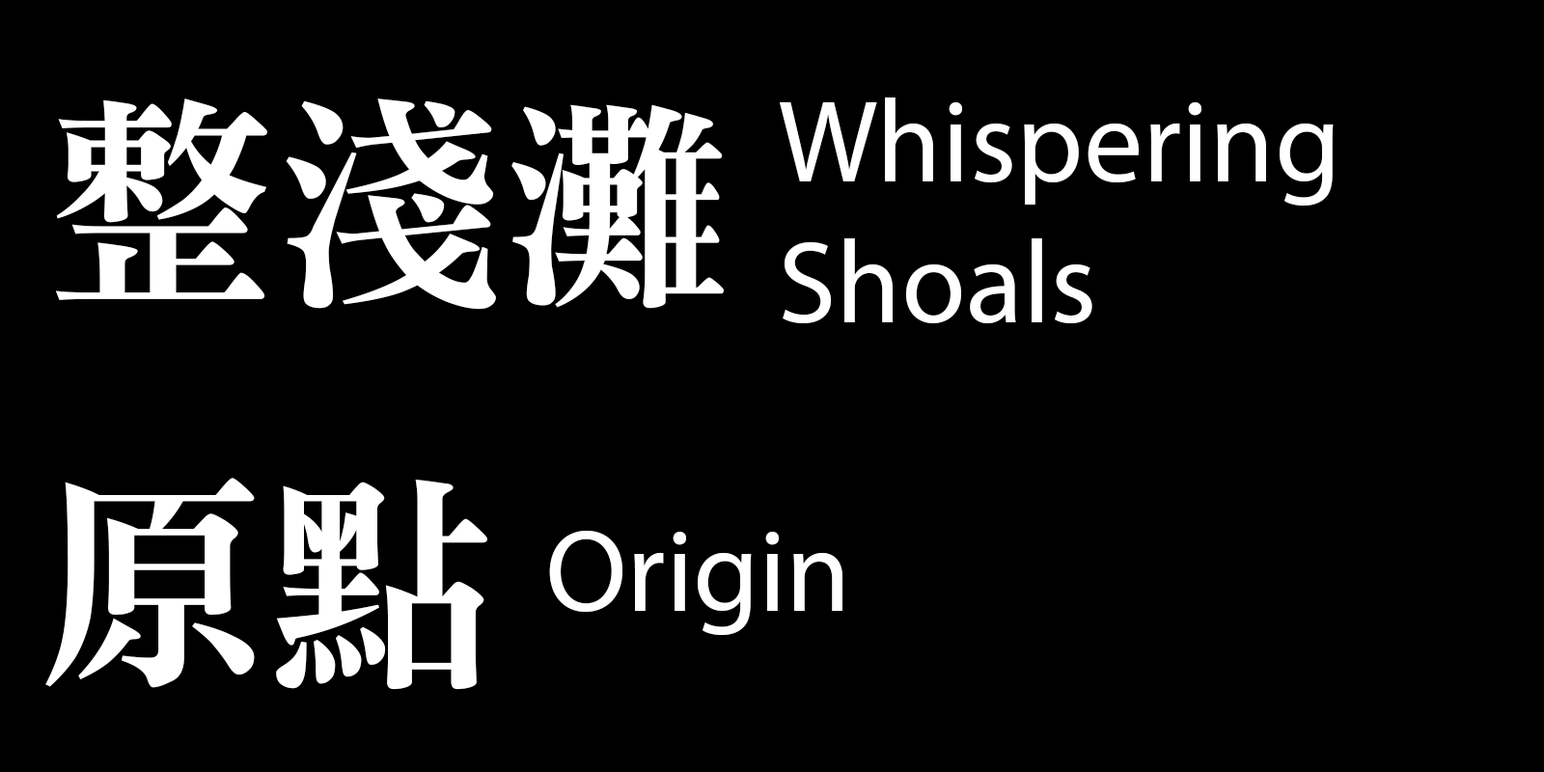
<style>
.page{position:relative;width:1544px;height:772px;background:#000000}
.page>*{position:absolute;margin:0}
.t1{font:228.9px "MTR-Sung";color:#ffffff}
.t2{font:117.9px "MyriadPro-Regular";color:#ffffff}
</style>
<div class="page">
<p class="t1" style="left:55px;top:98px;width:669px;height:212px">整淺灘</p>
<p class="t2" style="left:780px;top:97px;width:554px;height:226px">Whispering <br>Shoals</p>
<p class="t1" style="left:45px;top:478px;width:442px;height:212px">原點</p>
<p class="t2" style="left:549px;top:531px;width:294px;height:104px">Origin</p>
</div>
